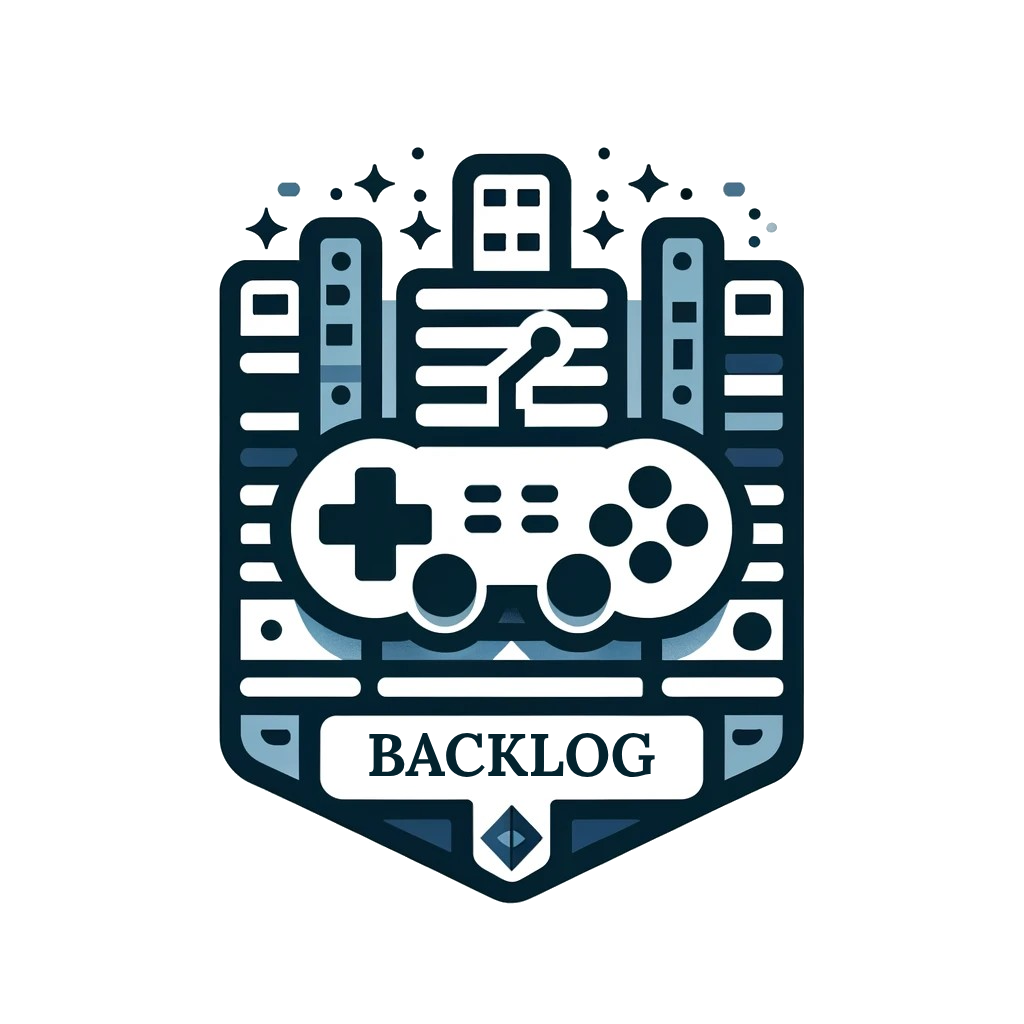
<style>
.page{position:relative;width:1024px;height:1024px;background:#ffffff}
.page>*{position:absolute;margin:0}
.t1{font:60px "Lora-Bold";color:#03232e}
</style>
<div class="page">
<p class="t1" style="left:369px;top:732px;width:286px;height:45px">BACKLOG</p>
</div>
